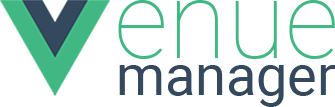
<style>
.page{position:relative;width:335px;height:107px;background:#ffffff}
.page>*{position:absolute;margin:0}
.t1{font:107.8px "Roboto-Thin";color:#41b883}
.t2{font:55.8px "Roboto-Regular";color:#34495e}
</style>
<div class="page">
<p class="t1" style="left:118px;top:0px;width:217px;height:59px">enue</p>
<p class="t2" style="left:119px;top:65px;width:217px;height:42px">manager</p>
</div>
